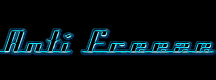
<style>
.page{position:relative;width:216px;height:80px;background:#000000}
.page>*{position:absolute;margin:0}
.t1{font:36px "AmericanaDreamsExpanded"}
</style>
<div class="page">
<p class="t1" style="left:0px;top:30px;width:214px;height:23px">Anti Freeze</p>
</div>
